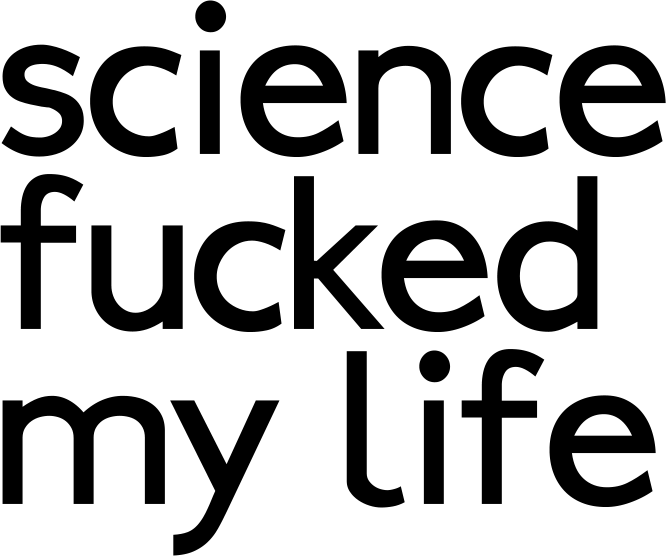
<style>
.page{position:relative;width:666px;height:556px;background:#ffffff}
.page>*{position:absolute;margin:0}
.t1{font:240px/175px "Ubahn";color:#000000}
</style>
<div class="page">
<p class="t1" style="left:0px;top:0px;width:666px;height:556px">science<br>fucked<br>my life</p>
</div>
